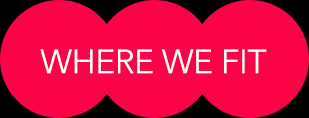
<style>
.page{position:relative;width:309px;height:118px;background:#fb0347}
.page>*{position:absolute;margin:0}
.t1{font:33.3px "Avenir-Light";letter-spacing:-0.01em;color:#ffffff;text-transform:uppercase}
</style>
<div class="page">
<p class="t1" style="left:40px;top:49px;width:227px;height:25px">where WE fit</p>
</div>
